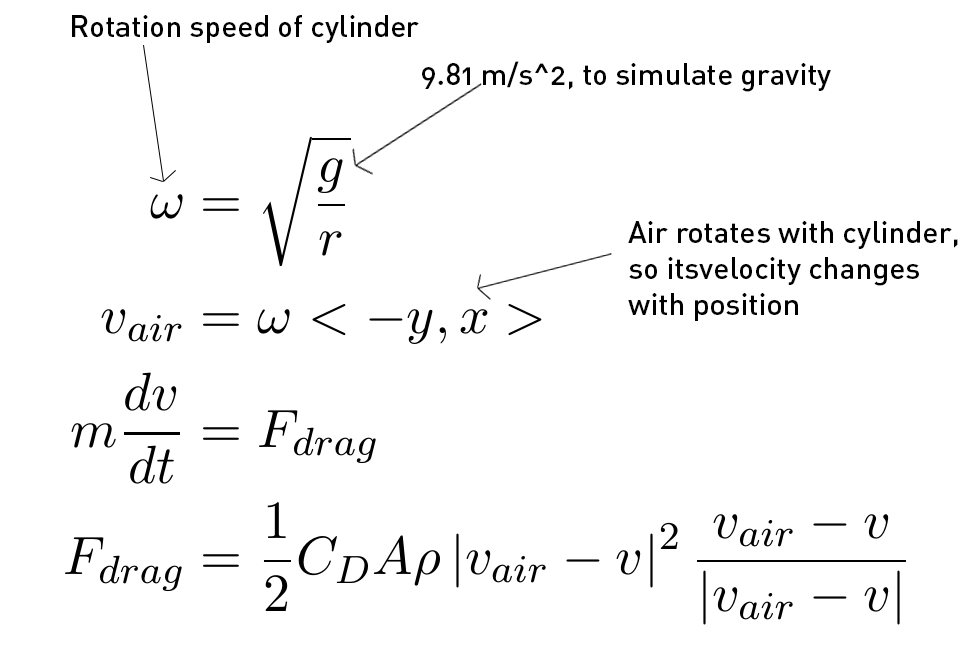
<style>
.page{position:relative;width:962px;height:669px;background:#ffffff}
.page>*{position:absolute;margin:0}
.t1{font:30px "DIN-MediumAlternate";color:#000000}
</style>
<div class="page">
<p class="t1" style="left:72px;top:15px;width:347px;height:28px">Rotation speed of cylinder</p>
<p class="t1" style="left:422px;top:61px;width:409px;height:31px">9.81 m/s^2, to simulate gravity</p>
<p class="t1" style="left:628px;top:221px;width:330px;height:100px">Air rotates with cylinder,<br>so itsvelocity changes <br>with position</p>
</div>
